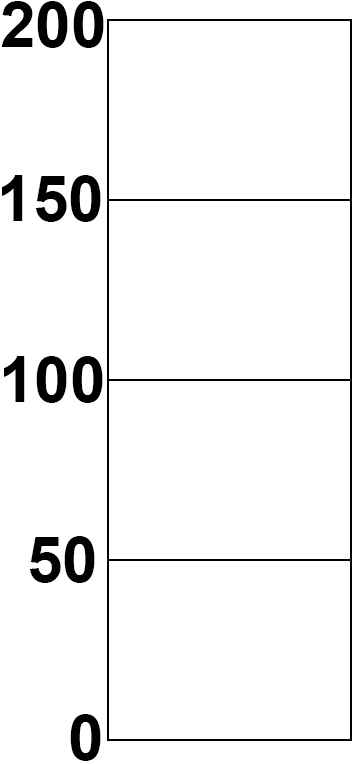
<style>
.page{position:relative;width:364px;height:764px;background:#ffffff}
.page>*{position:absolute;margin:0}
.t1{font:64px "Arial-BoldMT";color:#000000}
.t2{font:64px "Arial-BoldMT";color:#010101}
</style>
<div class="page">
<p class="t1" style="left:1px;top:1px;width:103px;height:47px">200</p>
<p class="t1" style="left:2px;top:175px;width:99px;height:47px">150</p>
<p class="t1" style="left:4px;top:356px;width:99px;height:47px">100</p>
<p class="t2" style="left:30px;top:536px;width:65px;height:47px">50</p>
<p class="t1" style="left:70px;top:714px;width:31px;height:47px">0</p>
</div>
